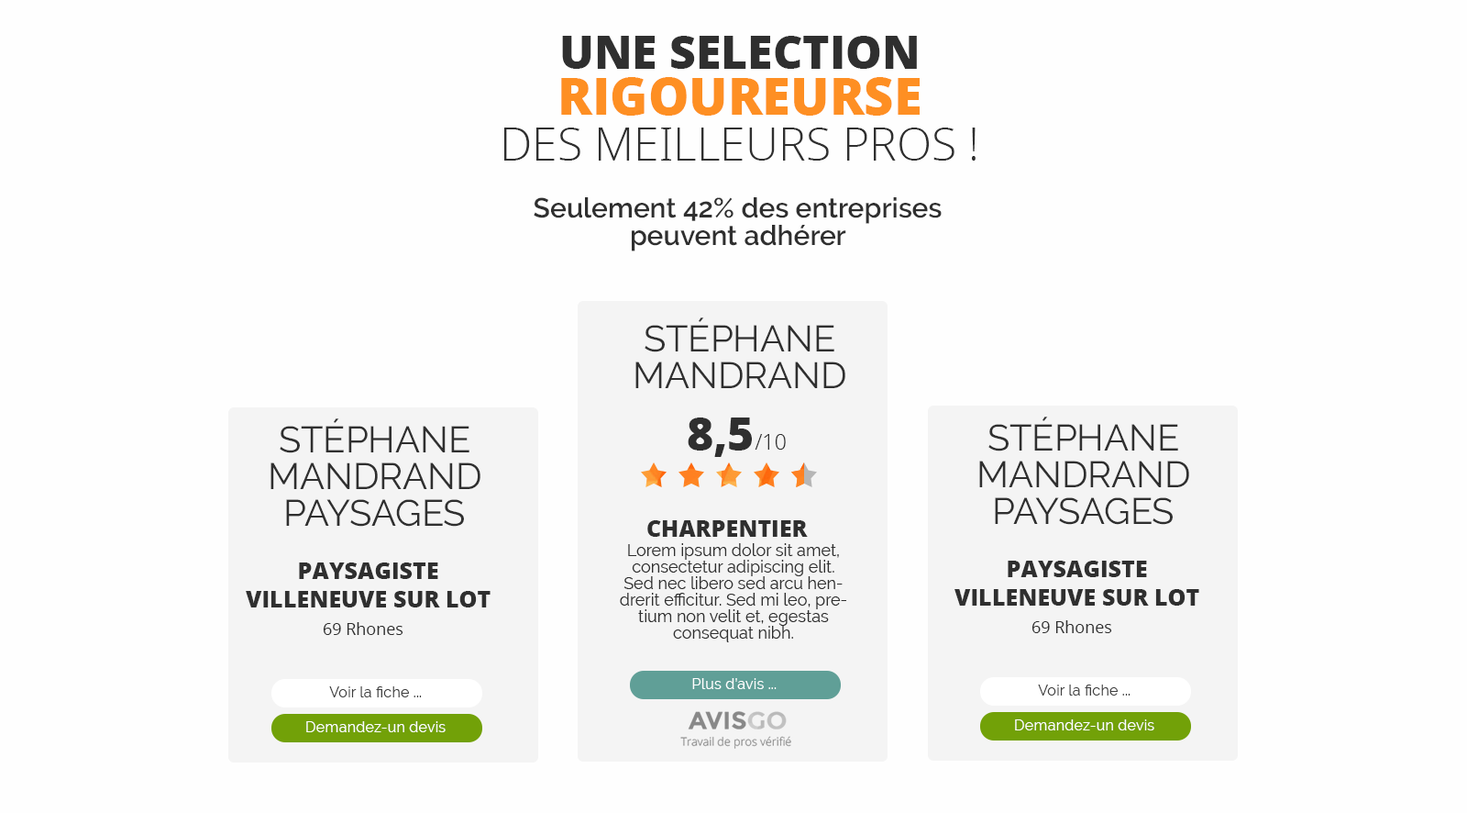
<style>
.page{position:relative;width:1467px;height:813px;background:#fefefe}
.page>*{position:absolute;margin:0}
.t1{font:45.9px/45.9px "OpenSans-Light";color:#2f2f2f;text-transform:uppercase}
.t2{font:45.9px/45.9px "OpenSans-ExtraBold";color:#2f2f2f;text-transform:uppercase}
.t3{font:51.4px/45.9px "OpenSans-ExtraBold";color:#fe8f23;text-transform:uppercase}
.t4{font:27.5px/27.5px "Raleway-SemiBold";color:#2f2f2f}
.t5{font:36.7px/36.7px "Raleway-Regular";color:#2f2f2f}
.t6{font:45.9px "OpenSans-ExtraBold";color:#2f2f2f;text-transform:uppercase}
.t7{font:21.4px "OpenSans-Light";color:#2f2f2f;text-transform:uppercase}
.t8{font:23.1px "OpenSans-ExtraBold";color:#2f2f2f;text-transform:uppercase}
.t9{font:16.5px/16.5px "Raleway-Regular";color:#2f2f2f}
.t10{font:16.5px "OpenSans-Regular";color:#2f2f2f}
.t11{font:15.1px "Raleway-Regular";color:#ffffff}
.t12{font:15.1px "Raleway-Regular";color:#404040}
</style>
<div class="page">
<p class="t1" style="left:504px;top:36px;width:472px;height:125px;text-align:center"><span class="t2">Une selection<br></span><span class="t3">rigoureurse<br></span>des meilleurs Pros !</p>
<p class="t4" style="left:534px;top:197px;width:408px;height:54px;text-align:center">Seulement 42% des entreprises<br>peuvent adhérer</p>
<p class="t5" style="left:636px;top:317px;width:210px;height:71px;text-align:center">STÉPHANE MANDRAND</p>
<p class="t5" style="left:271px;top:418px;width:210px;height:108px;text-align:center">STÉPHANE MANDRAND PAYSAGES</p>
<p class="t6" style="left:688px;top:417px;width:64px;height:40px">8,5</p>
<p class="t5" style="left:980px;top:416px;width:210px;height:109px;text-align:center">STÉPHANE MANDRAND PAYSAGES</p>
<p class="t7" style="left:755px;top:434px;width:31px;height:15px">/10</p>
<p class="t8" style="left:648px;top:520px;width:160px;height:17px">charpentier</p>
<p class="t9" style="left:620px;top:543px;width:227px;height:99px;text-align:center">Lorem ipsum dolor sit amet, consectetur adipiscing elit. Sed nec libero sed arcu hendrerit efficitur. Sed mi leo, pretium non velit et, egestas consequat nibh.</p>
<p class="t8" style="left:246px;top:562px;width:245px;height:45px;text-align:center">Paysagiste<br>Villeneuve sur lot</p>
<p class="t8" style="left:955px;top:560px;width:245px;height:45px;text-align:center">Paysagiste<br>Villeneuve sur lot</p>
<p class="t10" style="left:323px;top:622px;width:81px;height:13px">69 Rhones</p>
<p class="t10" style="left:1032px;top:620px;width:81px;height:13px">69 Rhones</p>
<p class="t11" style="left:692px;top:678px;width:85px;height:11px">Plus d’avis ...</p>
<p class="t12" style="left:329px;top:686px;width:93px;height:11px">Voir la fiche ...</p>
<p class="t12" style="left:1038px;top:684px;width:93px;height:11px">Voir la fiche ...</p>
<p class="t11" style="left:306px;top:721px;width:140px;height:11px">Demandez-un devis</p>
<p class="t11" style="left:1015px;top:719px;width:140px;height:11px">Demandez-un devis</p>
</div>
